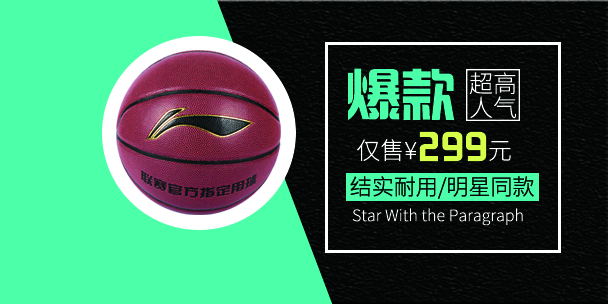
<style>
.page{position:relative;width:608px;height:304px;background:#4cffa9}
.page>*{position:absolute;margin:0}
.t1{font:54.7px "FZHZGBJW--GB1-0";color:#4cffa9}
.t2{font:24px/24px "SourceHanSansCN-Light";color:#ffffff}
.t3{font:24px "SourceHanSansCN-Light";color:#ffffff}
.t4{font:36px "FZHZGBJW--GB1-0";color:#d6ff4a}
.t5{font:22px "SourceHanSansCN-Light";color:#040606}
.t6{font:16px "SourceHanSansCN-Light";color:#ffffff}
</style>
<div class="page">
<p class="t1" style="left:348px;top:68px;width:107px;height:52px">爆款</p>
<p class="t2" style="left:469px;top:72px;width:47px;height:47px">超高<br>人气</p>
<p class="t3" style="left:357px;top:131px;width:154px;height:31px">仅售¥<span class="t4">299</span>元</p>
<p class="t5" style="left:350px;top:176px;width:184px;height:23px">结实耐用/明星同款</p>
<p class="t6" style="left:352px;top:208px;width:171px;height:18px">Star With the Paragraph</p>
</div>
